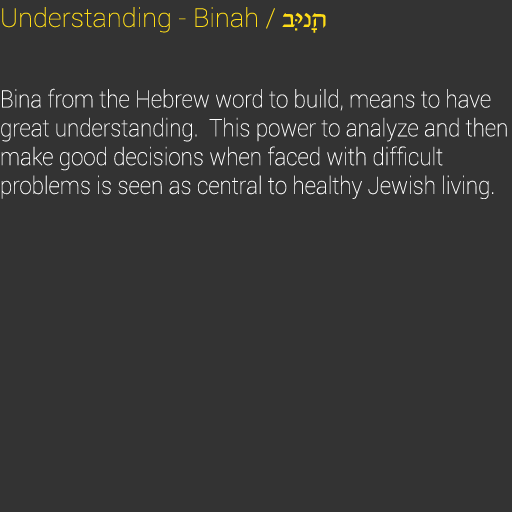
<style>
.page{position:relative;width:512px;height:512px;background:#333333}
.page>*{position:absolute;margin:0}
.t1{font:26px "Roboto-Thin";color:#ffdd17;scale:1.04 1}
.t2{font:26px "David";color:#ffdd17;scale:1.04 1}
.t3{font:24px "Roboto-Thin";color:#ffffff;scale:0.93 1}
</style>
<div class="page">
<p class="t1" style="left:2px;top:7px;width:324px;height:26px">Understanding - Binah / <span class="t2">בִּינָה</span></p>
<p class="t3" style="left:1px;top:88px;width:506px;height:111px">Bina from the Hebrew word to build, means to have great understanding.  This power to analyze and then make good decisions when faced with difficult <br>problems is seen as central to healthy Jewish living.</p>
</div>
